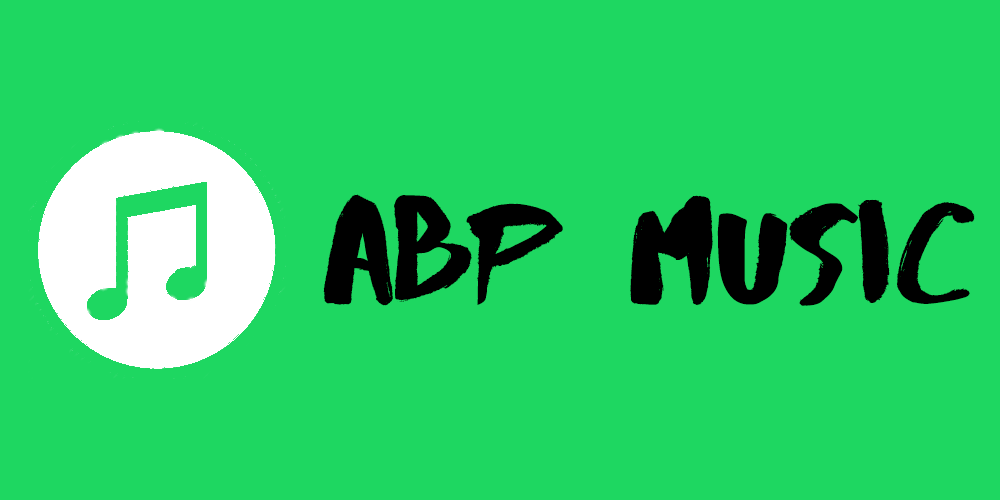
<style>
.page{position:relative;width:1000px;height:500px;background:#1ed761}
.page>*{position:absolute;margin:0}
.t1{font:146.6px "Abys-Regular";color:#000000}
</style>
<div class="page">
<p class="t1" style="left:323px;top:194px;width:652px;height:112px">ABP MUSIC</p>
</div>
